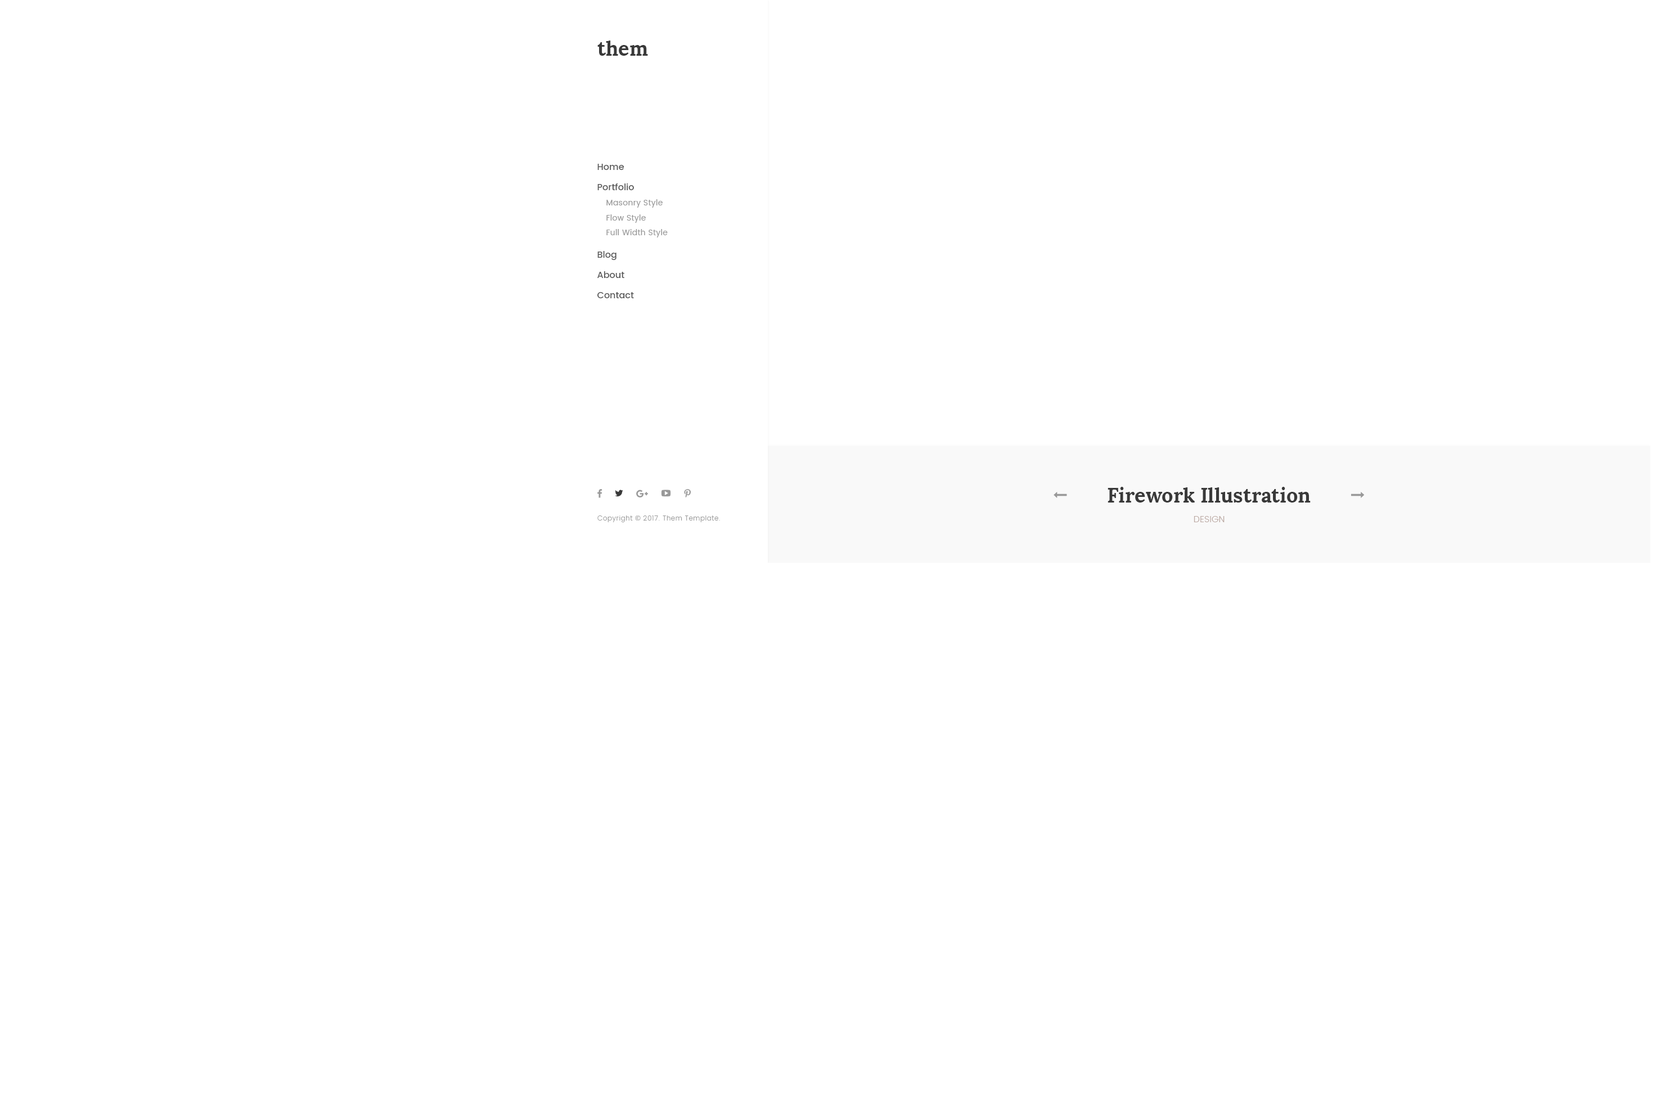
<style>
.page{position:relative;width:1656px;height:1112px;background:#ffffff}
.page>*{position:absolute;margin:0}
.t1{font:20.2px "Lora-Bold";color:#393939}
.t2{font:9px "Poppins-Medium";color:#595959}
.t3{font:7.9px "Poppins-Regular";letter-spacing:0.025em;color:#999999}
.t4{font:6.8px "Poppins-Light";letter-spacing:0.05em;color:#999999}
.t5{font:6.8px "OpenSans";letter-spacing:0.05em;color:#999999}
.t6{font:9px "Poppins-Light";letter-spacing:0.01em;color:#bcaaa4;text-transform:uppercase}
</style>
<div class="page">
<p class="t1" style="left:597px;top:40px;width:51px;height:16px">them</p>
<p class="t2" style="left:597px;top:164px;width:27px;height:6px">Home</p>
<p class="t2" style="left:597px;top:183px;width:37px;height:7px">Portfolio</p>
<p class="t3" style="left:606px;top:199px;width:57px;height:9px">Masonry Style</p>
<p class="t3" style="left:606px;top:214px;width:40px;height:9px">Flow Style</p>
<p class="t3" style="left:606px;top:229px;width:62px;height:8px">Full Width Style</p>
<p class="t2" style="left:597px;top:251px;width:19px;height:9px">Blog</p>
<p class="t2" style="left:597px;top:271px;width:27px;height:7px">About</p>
<p class="t2" style="left:597px;top:292px;width:37px;height:6px">Contact</p>
<p class="t1" style="left:1108px;top:487px;width:203px;height:15px">Firework Illustration</p>
<p class="t4" style="left:597px;top:515px;width:123px;height:7px">Copyright <span class="t5">© </span>2017. Them Template.</p>
<p class="t6" style="left:1194px;top:516px;width:31px;height:6px">Design</p>
</div>
